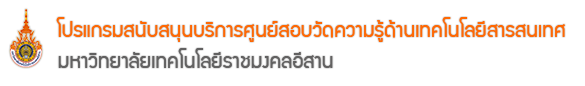
<style>
.page{position:relative;width:585px;height:86px;background:#ffffff}
.page>*{position:absolute;margin:0}
.t1{font:23.1px "supermarket";color:#ff6803}
.t2{font:23.1px "supermarket";color:#626161}
</style>
<div class="page">
<p class="t1" style="left:56px;top:17px;width:510px;height:25px">โปรแกรมสนับสนุนบริการศูนย์สอบวัดความรู้ด้านเทคโนโลยีสารสนเทศ</p>
<p class="t2" style="left:58px;top:48px;width:275px;height:20px">มหาวิทยาลัยเทคโนโลยีราชมงคลอีสาน</p>
</div>
